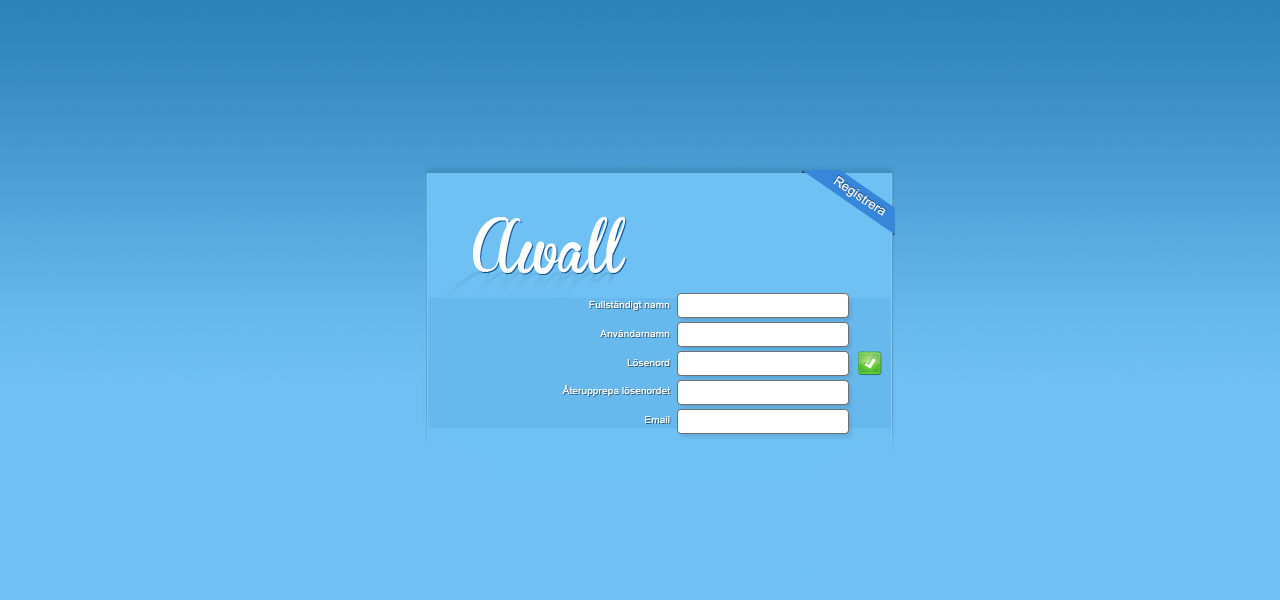
<style>
.page{position:relative;width:1280px;height:600px;background:#6fc0f3}
.page>*{position:absolute;margin:0}
.t1{font:13px "ArialMT";color:#ffffff}
.t2{font:52px "BrannbollFet";color:#ffffff}
.t3{font:10.3px/28.6px "ArialMT";color:#ffffff}
</style>
<div class="page">
<p class="t1" style="left:833px;top:175px;width:53px;height:41px;rotate:33deg">Registrera</p>
<p class="t2" style="left:473px;top:217px;width:153px;height:57px">Awall</p>
<p class="t3" style="left:562px;top:301px;width:108px;height:122px;text-align:right">Fullständigt namn<br>Användarnamn<br>Lösenord<br>Återupprepa lösenordet<br>Email</p>
</div>
